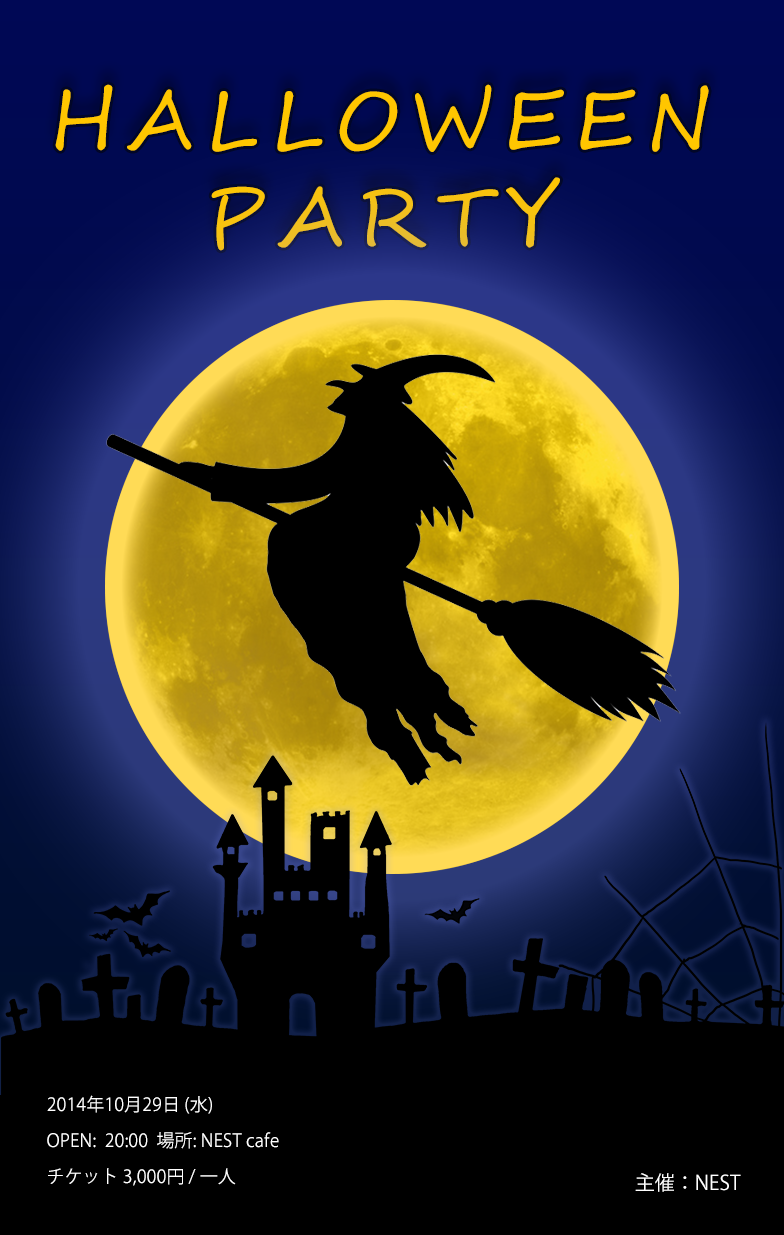
<style>
.page{position:relative;width:784px;height:1235px;background:#000000}
.page>*{position:absolute;margin:0}
.t1{font:80px/82px "SegoeScript";letter-spacing:0.14em;color:#ffc600}
.t2{font:18px/21px "KozGoPr6N-Regular";color:#ffffff}
.t3{font:20px "KozGoPr6N-Regular";color:#ffffff}
</style>
<div class="page">
<p class="t1" style="left:55px;top:84px;width:654px;height:167px;text-align:center">HALLOWEEN<br>PARTY</p>
<p class="t2" style="left:47px;top:1095px;width:232px;height:91px">2014年10月29日 (水)<br>OPEN:  20:00  場所: NEST cafe<br>チケット 3,000円 / 一人</p>
<p class="t3" style="left:635px;top:1173px;width:106px;height:19px">主催：NEST</p>
</div>
